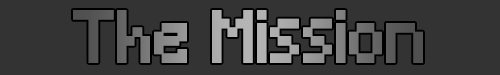
<style>
.page{position:relative;width:500px;height:75px;background:#333333}
.page>*{position:absolute;margin:0}
.t1{font:69.3px "Minecraft";font-weight:bold;scale:0.9 1}
</style>
<div class="page">
<p class="t1" style="left:73px;top:10px;width:350px;height:53px">The Mission</p>
</div>
